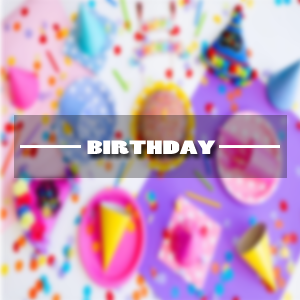
<style>
.page{position:relative;width:300px;height:300px}
.page>*{position:absolute;margin:0}
.t1{font:18px "PoplarStd";color:#ffffff;scale:2 1}
</style>
<div class="page">
<p class="t1" style="left:87px;top:140px;width:129px;height:14px">BIRTHDAY</p>
</div>
